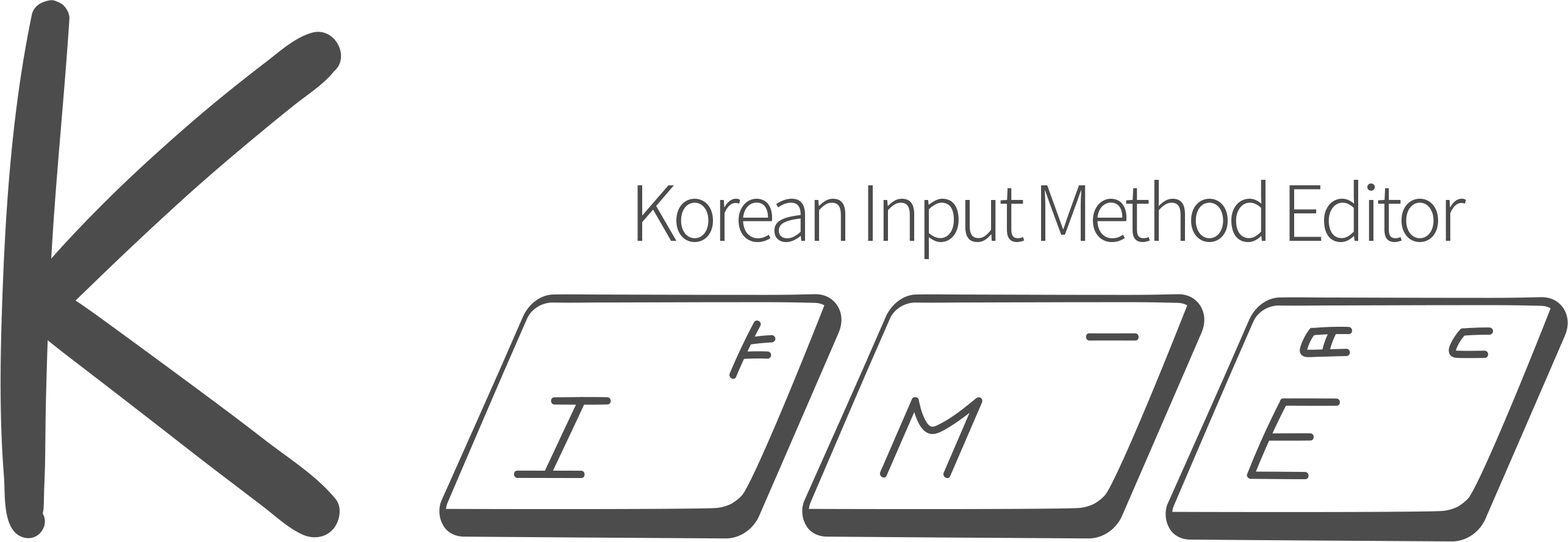
<style>
.page{position:relative;width:1568px;height:542px;background:#ffffff}
.page>*{position:absolute;margin:0}
.t1{font:76.2px "NotoSansCJKkr-Light";letter-spacing:-0.06em;color:#4c4c4c}
</style>
<div class="page">
<p class="t1" style="left:637px;top:179px;width:829px;height:80px">Korean Input Method Editor</p>
</div>
